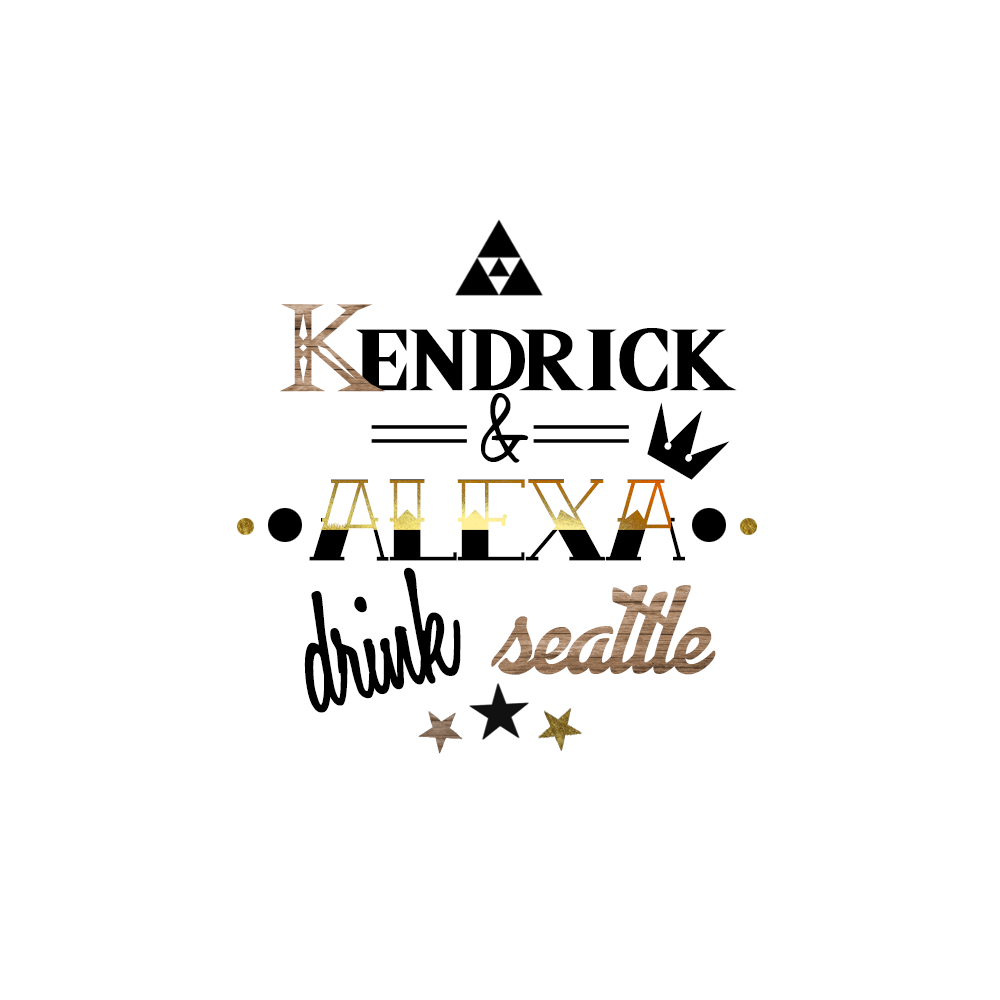
<style>
.page{position:relative;width:1000px;height:1000px;background:#ffffff}
.page>*{position:absolute;margin:0}
.t1{font:100px "Triforce";scale:1.44 1}
.t2{font:100px "Triforce";color:#000000;scale:1.44 1}
.t3{font:101.4px "HoneyScript-SemiBold";letter-spacing:-0.02em;color:#000000;scale:0.9 1}
.t4{font:190px "KingdomHearts";letter-spacing:-0.02em;color:#000000;scale:0.9 1}
.t5{font:101.4px "TattooInk";letter-spacing:-0.02em;scale:0.9 1}
.t6{font:172.3px "HoneyScript-SemiBold";letter-spacing:-0.02em;color:#000000;scale:0.9 1}
.t7{font:103.1px "AdvertisingScript-Bold";letter-spacing:-0.02em;scale:0.9 1}
</style>
<div class="page">
<p class="t1" style="left:280px;top:304px;width:105px;height:88px">K</p>
<p class="t2" style="left:356px;top:328px;width:381px;height:64px">endrick</p>
<p class="t3" style="left:481px;top:393px;width:48px;height:70px">&amp;</p>
<p class="t4" style="left:647px;top:402px;width:83px;height:78px;rotate:30deg">*</p>
<p class="t5" style="left:309px;top:479px;width:376px;height:82px">Alexa</p>
<p class="t6" style="left:304px;top:567px;width:157px;height:146px;rotate:-15deg">drink</p>
<p class="t7" style="left:491px;top:585px;width:225px;height:90px">seattle</p>
</div>
